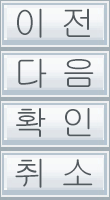
<style>
.page{position:relative;width:110px;height:200px}
.page>*{position:absolute;margin:0}
.t1{font:35.5px "Gulim";color:#52595e}
</style>
<div class="page">
<p class="t1" style="left:17px;top:8px;width:73px;height:30px">이 전</p>
<p class="t1" style="left:18px;top:58px;width:76px;height:30px">다 음</p>
<p class="t1" style="left:16px;top:108px;width:75px;height:29px">확 인</p>
<p class="t1" style="left:15px;top:158px;width:78px;height:30px">취 소</p>
</div>
